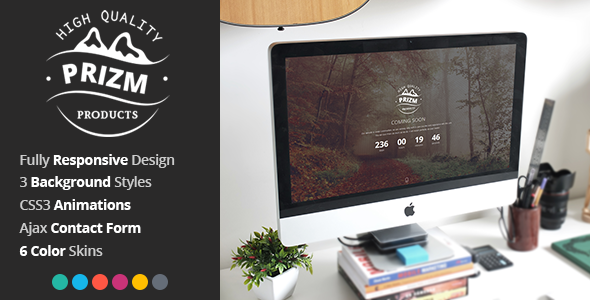
<style>
.page{position:relative;width:590px;height:300px;background:#2a2929}
.page>*{position:absolute;margin:0}
.t1{font:14px "OpenSans-Bold";letter-spacing:-0.025em;color:#ffffff}
.t2{font:14px "OpenSans-Semibold";letter-spacing:-0.025em;color:#cccccc}
</style>
<div class="page">
<p class="t1" style="left:19px;top:154px;width:156px;height:102px"><span class="t2">Fully </span>Responsive<span class="t2"> Design<br>3 </span>Background <span class="t2">Styles<br>CSS3 </span>Animations<br><span class="t2">Ajax </span>Contact Form<br>6 Color <span class="t2">Skins</span></p>
</div>
